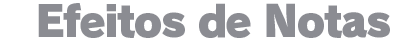
<style>
.page{position:relative;width:420px;height:44px;background:#ffffff}
.page>*{position:absolute;margin:0}
.t1{font:42.7px "RodinPro-UB";letter-spacing:-0.044em;color:#8b8c92}
</style>
<div class="page">
<p class="t1" style="left:38px;top:3px;width:352px;height:35px">Efeitos de Notas</p>
</div>
